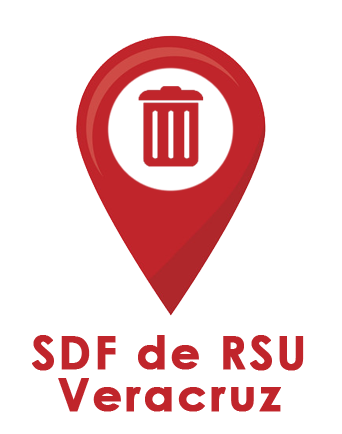
<style>
.page{position:relative;width:342px;height:434px;background:#ffffff}
.page>*{position:absolute;margin:0}
.t1{font:45.8px/41.7px "CenturyGothic-Bold";letter-spacing:0.05em;color:#c0252b;font-weight:bold}
</style>
<div class="page">
<p class="t1" style="left:32px;top:335px;width:272px;height:77px;text-align:center">SDF de RSU<br>Veracruz</p>
</div>
